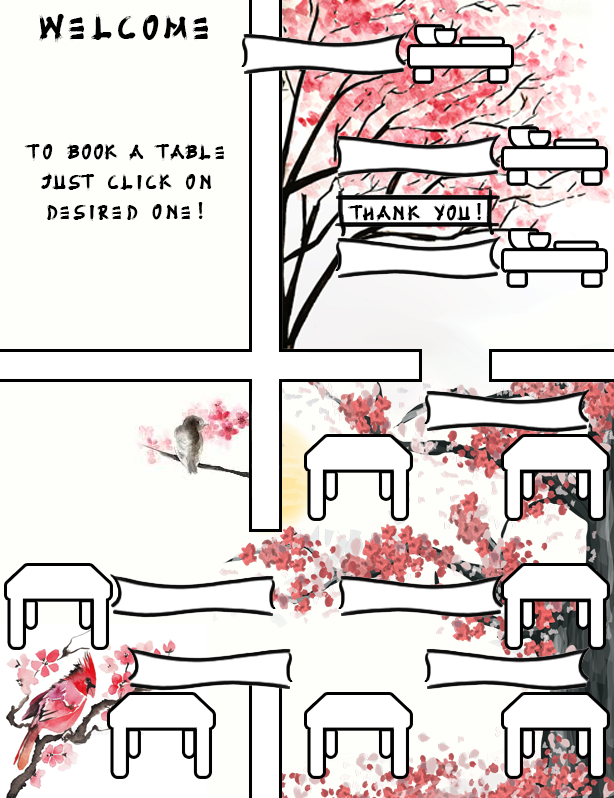
<style>
.page{position:relative;width:614px;height:798px;background:#fefffa}
.page>*{position:absolute;margin:0}
.t1{font:25px "Fujimaru-Regular";color:#000000}
.t2{font:41.7px "Fujimaru-Regular";color:#000000}
</style>
<div class="page">
<p class="t1" style="left:24px;top:13px;width:200px;height:208px;text-align:center"><span class="t2">welcome<br></span><br><br><br>to book a table just click on desired one!</p>
</div>
